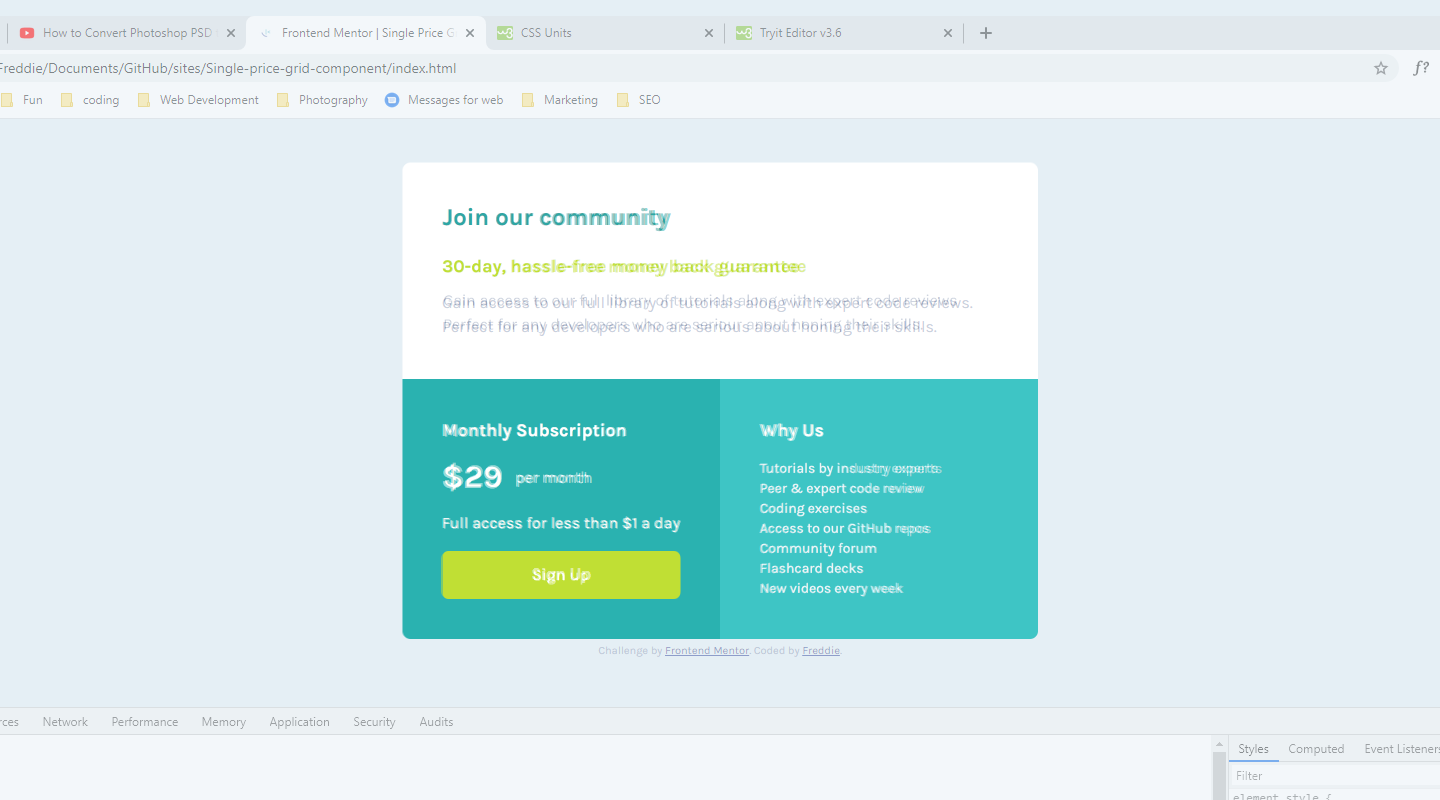
<style>
.page{position:relative;width:1440px;height:800px;background:#e5eff5}
.page>*{position:absolute;margin:0}
.t1{font:24px "Karla-Bold";letter-spacing:-0.01em}
.t2{font:18px "Karla-Bold";letter-spacing:-0.01em}
.t3{font:16px/24px "Karla-Regular"}
.t4{font:32px "Karla-Bold";letter-spacing:-0.01em}
.t5{font:14px/20px "Karla-Regular";letter-spacing:-0.01em}
.t6{font:16px "Karla-Regular";letter-spacing:-0.01em}
.t7{font:16px "Karla-Regular"}
</style>
<div class="page">
<p class="t1" style="left:443px;top:207px;width:225px;height:25px">Join our community</p>
<p class="t2" style="left:443px;top:259px;width:356px;height:18px">30-day, hassle-free money back guarantee</p>
<p class="t3" style="left:444px;top:294px;width:513px;height:40px">Gain access to our ful  library of tutorials along with expert code reviews Perfect for any developers who are seriour anout honing their skills.</p>
<p class="t2" style="left:445px;top:423px;width:180px;height:18px">Monthly Subscription</p>
<p class="t2" style="left:761px;top:423px;width:63px;height:18px">Why Us</p>
<p class="t4" style="left:445px;top:462px;width:57px;height:28px">$29</p>
<p class="t5" style="left:760px;top:462px;width:178px;height:134px">Tutorials by insustry experts<br>Peer &amp; expert code review<br>Coding exercises<br>Access to our GitHub repos<br>Community forum<br>Flashcard decks<br>New videos every week</p>
<p class="t6" style="left:516px;top:471px;width:73px;height:16px">per month</p>
<p class="t7" style="left:444px;top:517px;width:237px;height:16px">Full access for less than $1 a day</p>
<p class="t7" style="left:533px;top:569px;width:55px;height:16px">Sign up</p>
</div>
